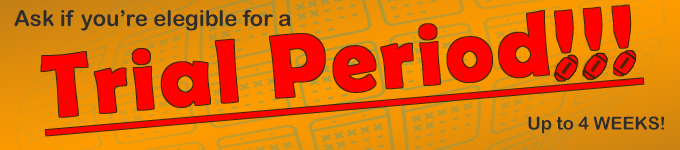
<style>
.page{position:relative;width:680px;height:150px}
.page>*{position:absolute;margin:0}
.t1{font:90px "BerlinSansFBDemi-Bold";letter-spacing:0.04em;color:#ff0000;text-decoration:underline}
.t2{font:22px "ArialRoundedMTBold";color:#2d2d2d}
.t3{font:18px "ArialRoundedMTBold";color:#2d2d2d}
</style>
<div class="page">
<p class="t1" style="left:41px;top:5px;width:603px;height:131px;rotate:-5deg">Trial Period!!!</p>
<p class="t2" style="left:14px;top:10px;width:277px;height:21px">Ask if you’re elegible for a</p>
<p class="t3" style="left:528px;top:116px;width:136px;height:18px">Up to 4 WEEKS!</p>
</div>
